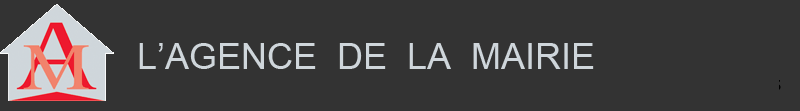
<style>
.page{position:relative;width:800px;height:111px;background:#333333}
.page>*{position:absolute;margin:0}
.t1{font:36px "ArialMT";color:#cfd6db}
</style>
<div class="page">
<p class="t1" style="left:139px;top:43px;width:455px;height:26px">L’AGENCE  DE  LA  MAIRIE</p>
</div>
